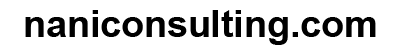
<style>
.page{position:relative;width:402px;height:54px;background:#ffffff}
.page>*{position:absolute;margin:0}
.t1{font:37.5px "Arial-BoldMT";color:#000000}
</style>
<div class="page">
<p class="t1" style="left:25px;top:10px;width:351px;height:35px">naniconsulting.com</p>
</div>
